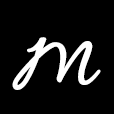
<style>
.page{position:relative;width:114px;height:114px;background:#000000}
.page>*{position:absolute;margin:0}
.t1{font:75.2px "Allura-Regular";color:#ffffff;font-weight:bold}
</style>
<div class="page">
<p class="t1" style="left:12px;top:37px;width:89px;height:53px">M</p>
</div>
